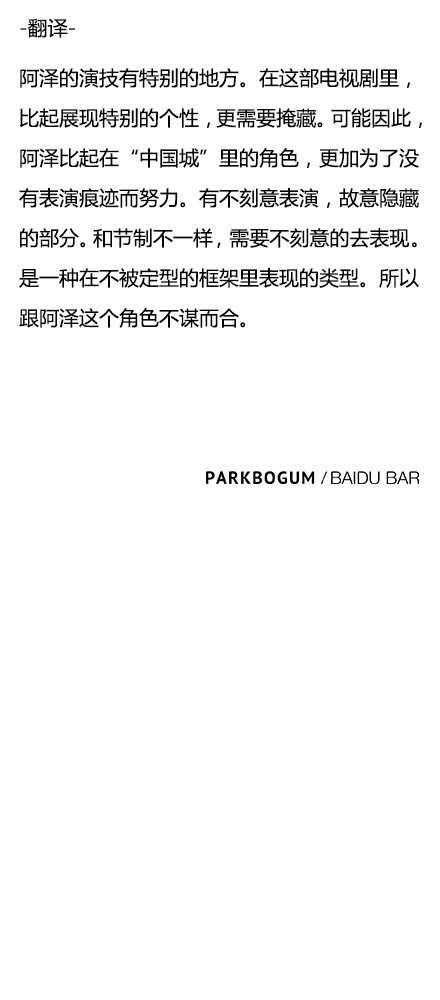
<style>
.page{position:relative;width:440px;height:1000px;background:#ffffff}
.page>*{position:absolute;margin:0}
.t1{font:20px/40px "MicrosoftYaHei";color:#000000}
.t2{font:20px/50px "MicrosoftYaHei";color:#000000}
.t3{font:20px/40px "MicrosoftYaHei";letter-spacing:-0.14em;color:#000000}
.t4{font:20px/40px "MicrosoftYaHei";letter-spacing:-0.26em;color:#000000}
.t5{font:20px/40px "MicrosoftYaHei";letter-spacing:-0.3em;color:#000000}
.t6{font:20px/40px "MicrosoftYaHei";letter-spacing:-0.18em;color:#000000}
.t7{font:20px/40px "MicrosoftYaHei";letter-spacing:0.06em;color:#000000}
</style>
<div class="page">
<p class="t1" style="left:19px;top:18px;width:404px;height:310px"><span class="t2">-翻译-<br></span>阿泽的演技有特别的地方。在这部电视剧里，比起展现特别的个性<span class="t3">，</span>更需要掩藏<span class="t4">。</span>可能因此，阿泽比起在“中国城”里的角色，更加为了没有表演痕迹而努力。有不刻意表演，故意隐藏的部分<span class="t5">。</span>和节制不一<span class="t6">样</span>，需要不刻意的去表<span class="t7">现</span>。是一种在不被定型的框架里表现的类型。所以跟阿泽这个角色不谋而合。</p>
</div>
